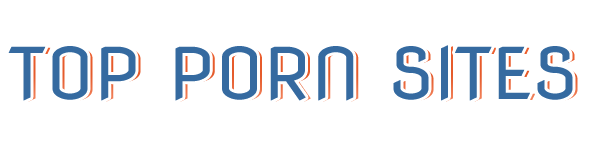
<style>
.page{position:relative;width:597px;height:150px;background:#ffffff}
.page>*{position:absolute;margin:0}
.t1{font:71px "NovaFlat";color:#356aa0}
.t2{font:71px "NovaFlat"}
</style>
<div class="page">
<p class="t1" style="left:8px;top:45px;width:565px;height:56px">TOP PORN SITES</p>
<p class="t2" style="left:13px;top:46px;width:565px;height:56px">TOP PORN SITES</p>
</div>
